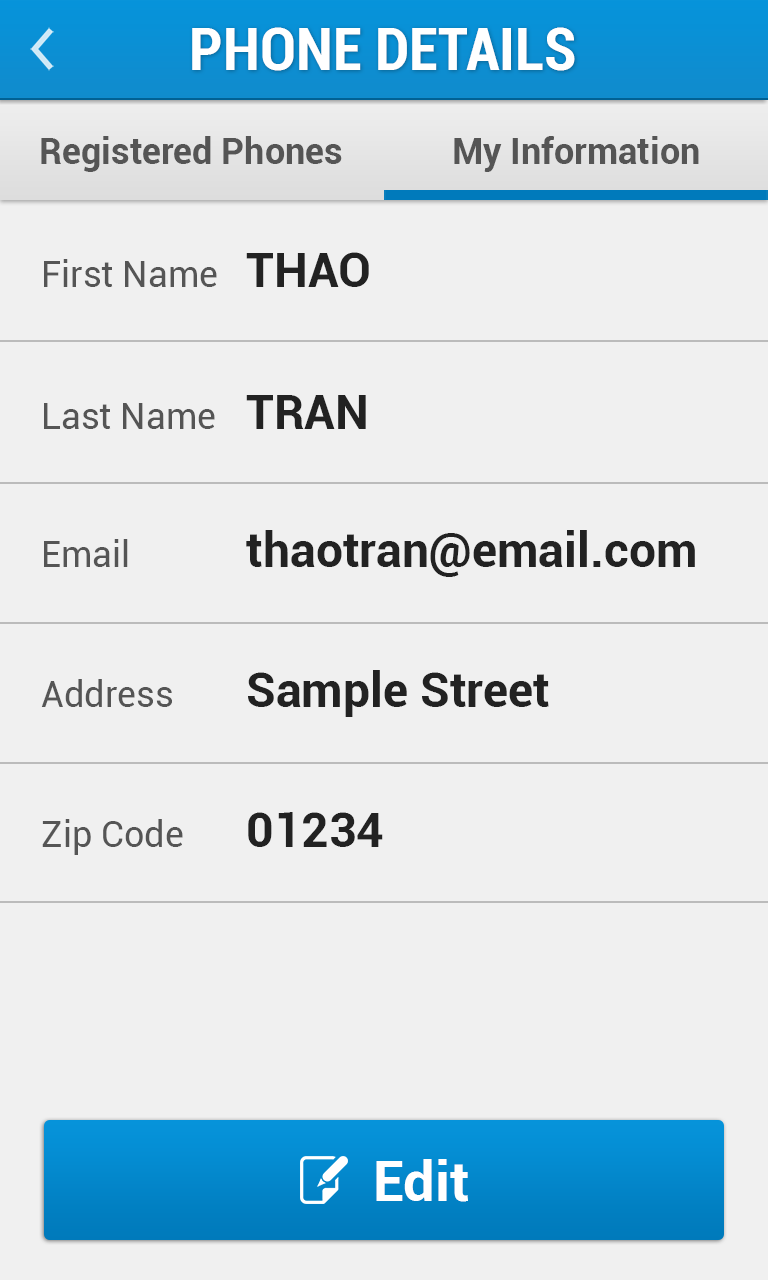
<style>
.page{position:relative;width:768px;height:1280px;background:#f0f0f0}
.page>*{position:absolute;margin:0}
.t1{font:60px "Roboto-BoldCondensed";color:#ffffff}
.t2{font:36px "Roboto-Bold";color:#555555}
.t3{font:48px "Roboto-Bold";color:#222222}
.t4{font:36px "Roboto-Regular";color:#555555}
.t5{font:56px "Roboto-Bold";color:#ffffff}
</style>
<div class="page">
<p class="t1" style="left:192px;top:27px;width:383px;height:44px">PHONE DETAILS</p>
<p class="t2" style="left:41px;top:136px;width:301px;height:36px">Registered Phones</p>
<p class="t2" style="left:454px;top:136px;width:245px;height:36px">My Information</p>
<p class="t3" style="left:246px;top:252px;width:123px;height:35px">THAO</p>
<p class="t4" style="left:44px;top:259px;width:173px;height:28px">First Name</p>
<p class="t3" style="left:246px;top:395px;width:120px;height:34px">TRAN</p>
<p class="t4" style="left:44px;top:403px;width:171px;height:26px">Last Name</p>
<p class="t3" style="left:246px;top:530px;width:449px;height:47px">thaotran@email.com</p>
<p class="t4" style="left:44px;top:539px;width:84px;height:28px">Email</p>
<p class="t3" style="left:248px;top:670px;width:301px;height:47px">Sample Street</p>
<p class="t4" style="left:41px;top:679px;width:131px;height:28px">Address</p>
<p class="t4" style="left:42px;top:819px;width:141px;height:36px">Zip Code</p>
<p class="t3" style="left:248px;top:812px;width:135px;height:35px">01234</p>
<p class="t5" style="left:376px;top:1159px;width:92px;height:43px">Edit</p>
</div>
